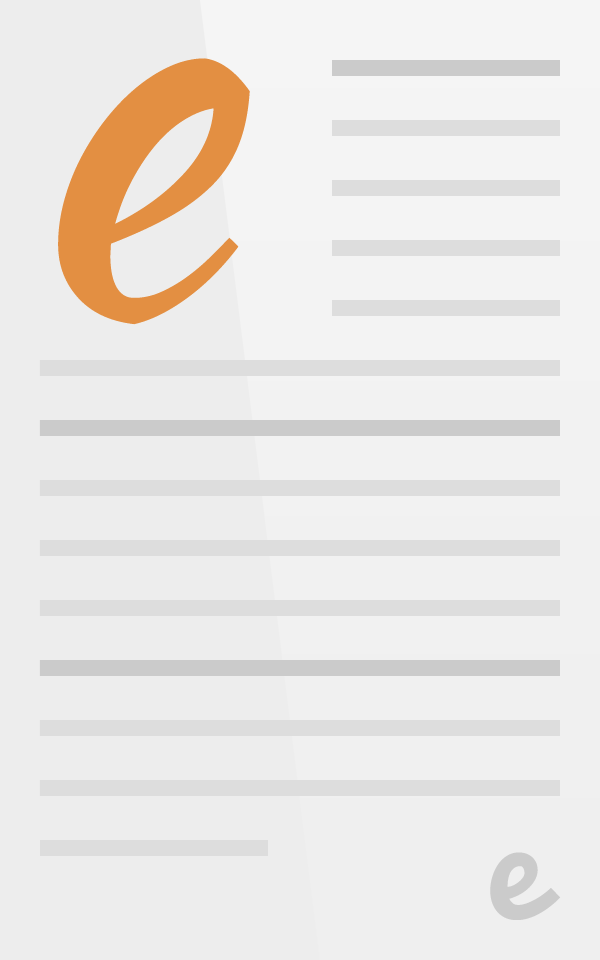
<style>
.page{position:relative;width:600px;height:960px;background:#ededed}
.page>*{position:absolute;margin:0}
.t1{font:520px "KaushanScript-Regular";color:#e38f42}
</style>
<div class="page">
<p class="t1" style="left:58px;top:58px;width:192px;height:267px">e</p>
</div>
